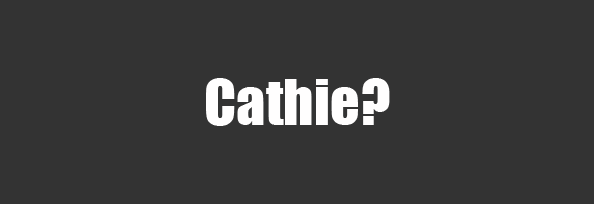
<style>
.page{position:relative;width:594px;height:204px;background:#333333}
.page>*{position:absolute;margin:0}
.t1{font:58.3px "Impact";color:#fffefe}
</style>
<div class="page">
<p class="t1" style="left:206px;top:78px;width:184px;height:48px">Cathie?</p>
</div>
